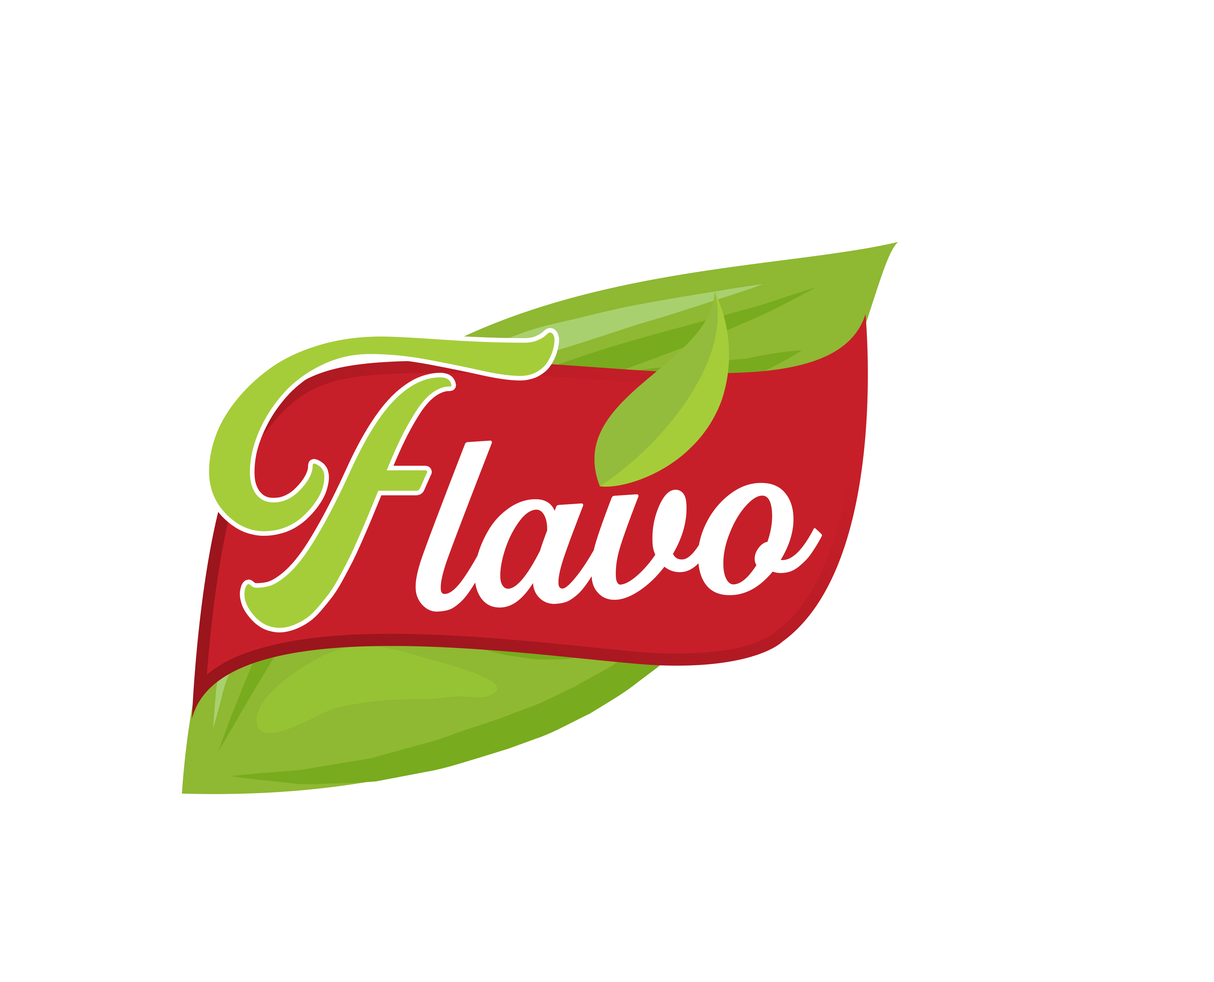
<style>
.page{position:relative;width:1214px;height:982px;background:#ffffff}
.page>*{position:absolute;margin:0}
.t1{font:364.7px "GoldenHillsDEMORegular";color:#a5cd39}
.t2{font:283.7px "GoldenHillsDEMORegular";color:#ffffff}
</style>
<div class="page">
<p class="t1" style="left:209px;top:332px;width:346px;height:296px">F</p>
<p class="t2" style="left:416px;top:441px;width:406px;height:171px;rotate:-4deg">lavo</p>
</div>
